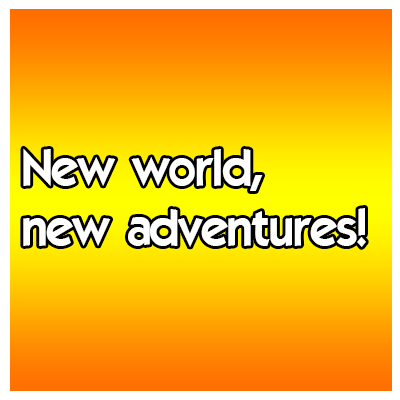
<style>
.page{position:relative;width:400px;height:400px}
.page>*{position:absolute;margin:0}
.t1{font:50px "ELEGANCE";color:#ffffff}
</style>
<div class="page">
<p class="t1" style="left:23px;top:148px;width:343px;height:99px">New world,<br>new adventures!</p>
</div>
